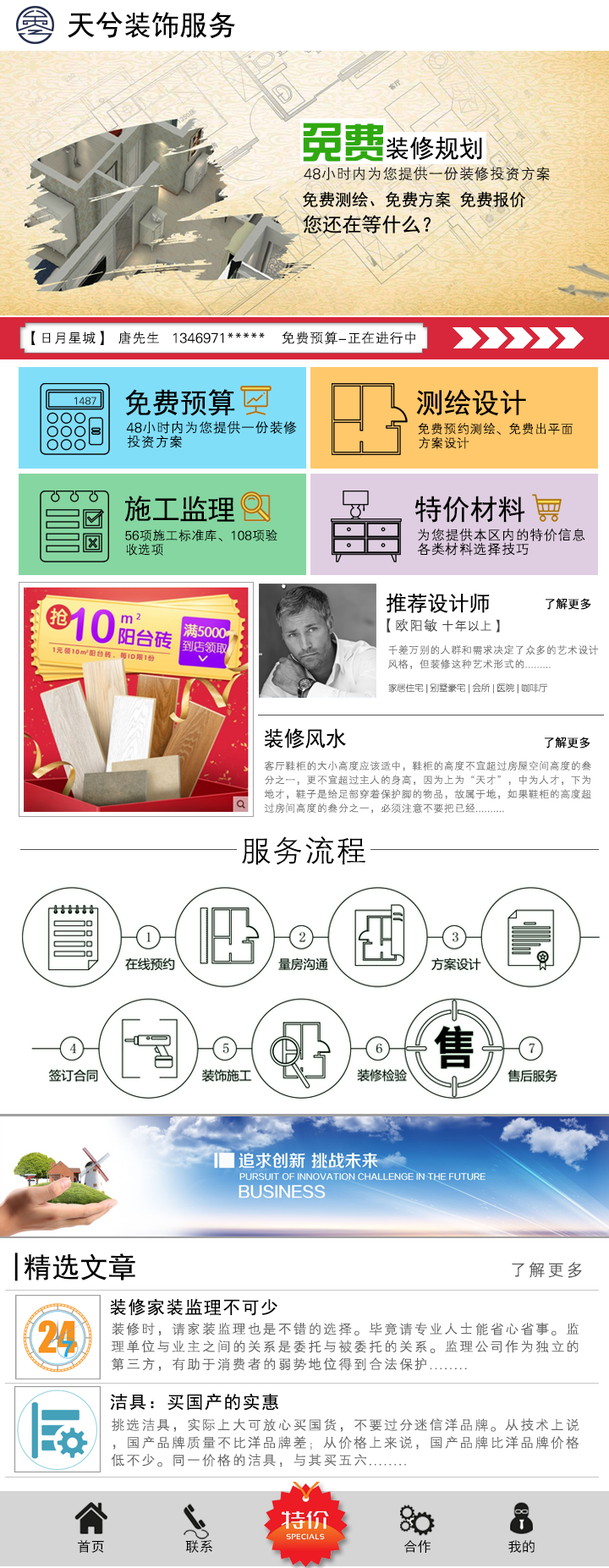
<style>
.page{position:relative;width:609px;height:1568px;background:#ffffff}
.page>*{position:absolute;margin:0}
.t1{font:28.2px "SimHei";color:#000000}
.t2{font:24.8px "SimHei";color:#000000}
.t3{font:41.7px "FZZYJW--GB1-0";color:#2fa90e}
.t4{font:15.3px "FZXH1JW--GB1-0";color:#141414}
.t5{font:16.6px "SimHei";color:#000000}
.t6{font:19.7px "SimHei";color:#000000}
.t7{font:14.1px "FZXH1JW--GB1-0";color:#080808}
.t8{font:10.6px "FZXH1JW--GB1-0";color:#252525}
.t9{font:14.1px/14.1px "FZXH1JW--GB1-0";color:#000000}
.t10{font:13px/14.1px "FZXH1JW--GB1-0";color:#010101}
.t11{font:13px/14.1px "FZXH1JW--GB1-0";color:#000000}
.t12{font:21.1px "SimHei";color:#000000}
.t13{font:11.9px "SimHei";color:#000000}
.t14{font:12.6px "FZXH1JW--GB1-0";color:#3f3f3f}
.t15{font:14.2px "FZXH1JW--GB1-0";color:#3f3f3f}
.t16{font:10.6px/14.1px "FZXH1JW--GB1-0";color:#767676}
.t17{font:8.8px "FZY1JW--GB1-0";color:#464646}
.t18{font:31.7px "FZXH1JW--GB1-0";color:#000000}
.t19{font:17.6px "FZXH1JW--GB1-0";letter-spacing:0.075em;color:#5a5a5a}
.t20{font:17.6px "SimHei";letter-spacing:0.075em;color:#000000}
.t21{font:14.1px/17.6px "FZXH1JW--GB1-0";letter-spacing:0.075em;color:#636363}
.t22{font:17.6px/21.1px "SimHei";letter-spacing:0.075em;color:#000000}
.t23{font:13.8px "SimHei";color:#000000}
</style>
<div class="page">
<p class="t1" style="left:68px;top:11px;width:167px;height:28px">天兮装饰服务</p>
<p class="t2" style="left:303px;top:123px;width:179px;height:39px"><span class="t3">免费</span>装修规划</p>
<p class="t4" style="left:304px;top:167px;width:246px;height:14px">48小时内为您提供一份装修投资方案</p>
<p class="t5" style="left:302px;top:191px;width:224px;height:17px">免费测绘、免费方案 免费报价</p>
<p class="t6" style="left:303px;top:215px;width:127px;height:18px">您还在等什么？</p>
<p class="t7" style="left:31px;top:331px;width:384px;height:14px">【日月星城】  唐先生   1346971*****    免费预算-正在进行中</p>
<p class="t1" style="left:125px;top:389px;width:110px;height:27px">免费预算</p>
<p class="t1" style="left:416px;top:389px;width:110px;height:27px">测绘设计</p>
<p class="t8" style="left:74px;top:397px;width:22px;height:8px">1487</p>
<p class="t9" style="left:126px;top:421px;width:171px;height:27px">48小时内为您提供一份装修<br>投资方案</p>
<p class="t10" style="left:418px;top:423px;width:155px;height:26px">免费预约测绘、免费出平面<br>方案设计</p>
<p class="t1" style="left:124px;top:496px;width:111px;height:26px">施工监理</p>
<p class="t1" style="left:414px;top:496px;width:111px;height:27px">特价材料</p>
<p class="t11" style="left:125px;top:529px;width:152px;height:27px">56项施工标准库、108项验<br>收选项</p>
<p class="t9" style="left:417px;top:529px;width:168px;height:27px">为您提供本区内的特价信息<br>各类材料选择技巧</p>
<p class="t12" style="left:386px;top:593px;width:104px;height:20px">推荐设计师</p>
<p class="t13" style="left:546px;top:598px;width:45px;height:12px">了解更多</p>
<p class="t14" style="left:387px;top:618px;width:113px;height:15px"><span class="t15">【欧阳敏 </span>十年以上】</p>
<p class="t16" style="left:387px;top:644px;width:212px;height:26px">千差万别的人群和需求决定了众多的艺术设计<br>风格，但装修这种艺术形式的.........</p>
<p class="t17" style="left:388px;top:683px;width:160px;height:11px">家居住宅 | 别墅豪宅 | 会所 | 医院 | 咖啡厅</p>
<p class="t12" style="left:264px;top:728px;width:82px;height:20px">装修风水</p>
<p class="t13" style="left:545px;top:737px;width:45px;height:11px">了解更多</p>
<p class="t16" style="left:264px;top:760px;width:327px;height:54px">客厅鞋柜的大小高度应该适中，鞋柜的高度不宜超过房屋空间高度的叁<br>分之一，更不宜超过主人的身高，因为上为“天才”，中为人才，下为<br>地才，鞋子是给足部穿着保护脚的物品，故属于地，如果鞋柜的高度超<br>过房间高度的叁分之一，必须注意不要把已经..........</p>
<p class="t18" style="left:242px;top:836px;width:123px;height:29px">服务流程</p>
<p class="t1" style="left:14px;top:1253px;width:121px;height:28px">|精选文章</p>
<p class="t19" style="left:512px;top:1262px;width:70px;height:16px">了解更多</p>
<p class="t20" style="left:110px;top:1298px;width:167px;height:18px">装修家装监理不可少</p>
<p class="t21" style="left:111px;top:1322px;width:467px;height:49px"><span class="t22"><br></span>装修时，请家装监理也是不错的选择。毕竟请专业人士能省心省事。监<br>理单位与业主之间的关系是委托与被委托的关系。监理公司作为独立的<br>第三方，有助于消费者的弱势地位得到合法保护........</p>
<p class="t20" style="left:110px;top:1393px;width:169px;height:18px">洁具：买国产的实惠</p>
<p class="t21" style="left:111px;top:1418px;width:468px;height:49px">挑选洁具，实际上大可放心买国货，不要过分迷信洋品牌。从技术上说<br>，国产品牌质量不比洋品牌差；从价格上来说，国产品牌比洋品牌价格<br>低不少。同一价格的洁具，与其买五六........</p>
<p class="t23" style="left:78px;top:1540px;width:26px;height:13px">首页</p>
<p class="t23" style="left:185px;top:1540px;width:27px;height:13px">联系</p>
<p class="t23" style="left:404px;top:1539px;width:26px;height:14px">合作</p>
<p class="t23" style="left:508px;top:1540px;width:27px;height:13px">我的</p>
</div>
